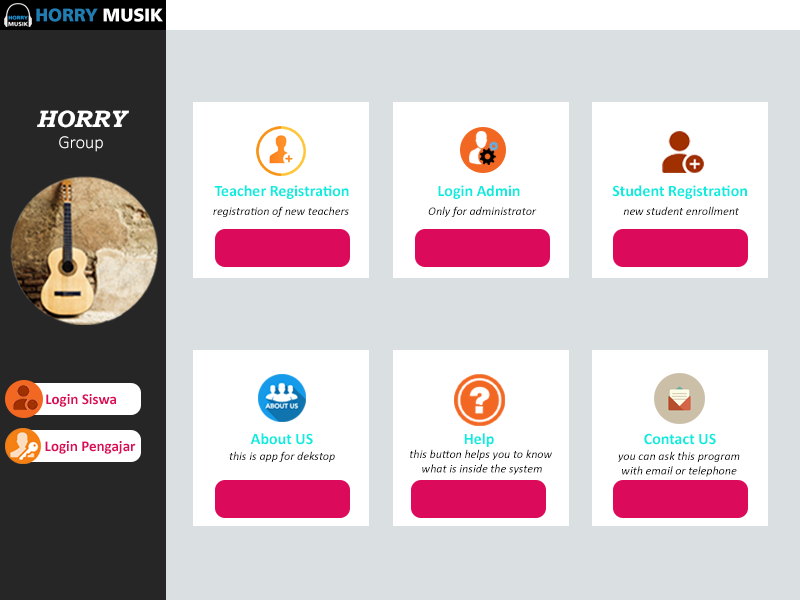
<style>
.page{position:relative;width:800px;height:600px;background:#ffffff}
.page>*{position:absolute;margin:0}
.t1{font:18px "Humanist777BT-BlackB";color:#217db1}
.t2{font:18px "Humanist777BT-BlackB";color:#ffffff}
.t3{font:24px "BookmanOldStyle-BoldItalic";color:#ffffff}
.t4{font:18px "Calibri-Light";color:#ffffff}
.t5{font:16px "Calibri-Bold";color:#0decdf}
.t6{font:12px "Calibri-Italic";color:#000000}
.t7{font:30px "ArialMT";color:#ffffff}
.t8{font:15px "Calibri-Bold";color:#db0a5b}
</style>
<div class="page">
<p class="t1" style="left:36px;top:8px;width:127px;height:14px">HORRY<span class="t2"> MUSIK</span></p>
<p class="t3" style="left:37px;top:110px;width:92px;height:18px">HORRY</p>
<p class="t4" style="left:59px;top:136px;width:44px;height:16px">Group</p>
<p class="t5" style="left:214px;top:185px;width:135px;height:14px">Teacher Registration</p>
<p class="t5" style="left:438px;top:185px;width:82px;height:14px">Login Admin</p>
<p class="t5" style="left:612px;top:185px;width:135px;height:14px">Student Registration</p>
<p class="t6" style="left:213px;top:206px;width:136px;height:11px">registration of new teachers</p>
<p class="t6" style="left:428px;top:206px;width:109px;height:11px">Only for administrator</p>
<p class="t6" style="left:623px;top:206px;width:116px;height:9px">new student enrollment</p>
<p class="t7" style="left:474px;top:388px;width:15px;height:22px">?</p>
<p class="t8" style="left:46px;top:394px;width:70px;height:13px">Login Siswa</p>
<p class="t5" style="left:250px;top:433px;width:63px;height:12px">About US</p>
<p class="t5" style="left:464px;top:433px;width:30px;height:14px">Help</p>
<p class="t5" style="left:644px;top:433px;width:72px;height:12px">Contact US</p>
<p class="t8" style="left:45px;top:441px;width:91px;height:13px">Login Pengajar</p>
<p class="t6" style="left:410px;top:449px;width:142px;height:26px;text-align:center">this button helps you to know <br>what is inside the system</p>
<p class="t6" style="left:229px;top:451px;width:106px;height:11px">this is app for dekstop</p>
<p class="t6" style="left:618px;top:451px;width:122px;height:26px;text-align:center">you can ask this program<br>with email or telephone</p>
</div>
